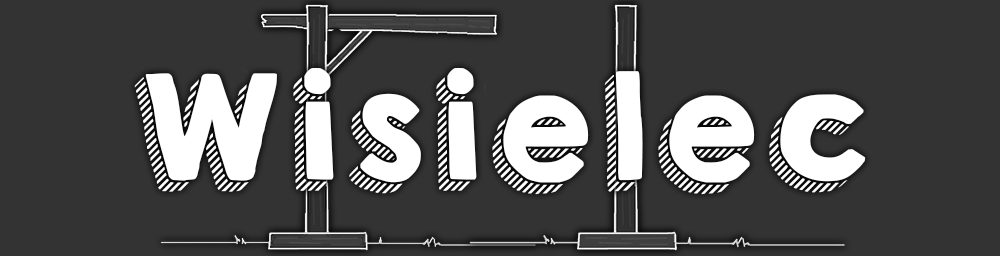
<style>
.page{position:relative;width:1000px;height:256px;background:#333333}
.page>*{position:absolute;margin:0}
.t1{font:132px "KGHAPPY";letter-spacing:0.05em;color:#ffffff}
</style>
<div class="page">
<p class="t1" style="left:134px;top:67px;width:732px;height:128px">Wisielec</p>
</div>
